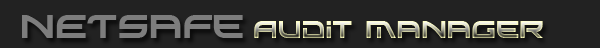
<style>
.page{position:relative;width:600px;height:48px;background:#222222}
.page>*{position:absolute;margin:0}
.t1{font:30px "Xirod";color:#7d7d7d}
.t2{font:22px "Xirod"}
</style>
<div class="page">
<p class="t1" style="left:22px;top:15px;width:221px;height:23px">NETSafe</p>
<p class="t2" style="left:254px;top:21px;width:289px;height:17px">Audit Manager</p>
</div>
